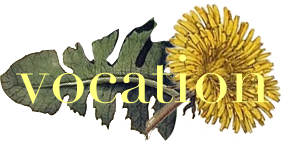
<style>
.page{position:relative;width:288px;height:167px;background:#ffffff}
.page>*{position:absolute;margin:0}
.t1{font:66.7px "Didot";color:#ffff80}
</style>
<div class="page">
<p class="t1" style="left:16px;top:54px;width:253px;height:51px">vocation</p>
</div>
